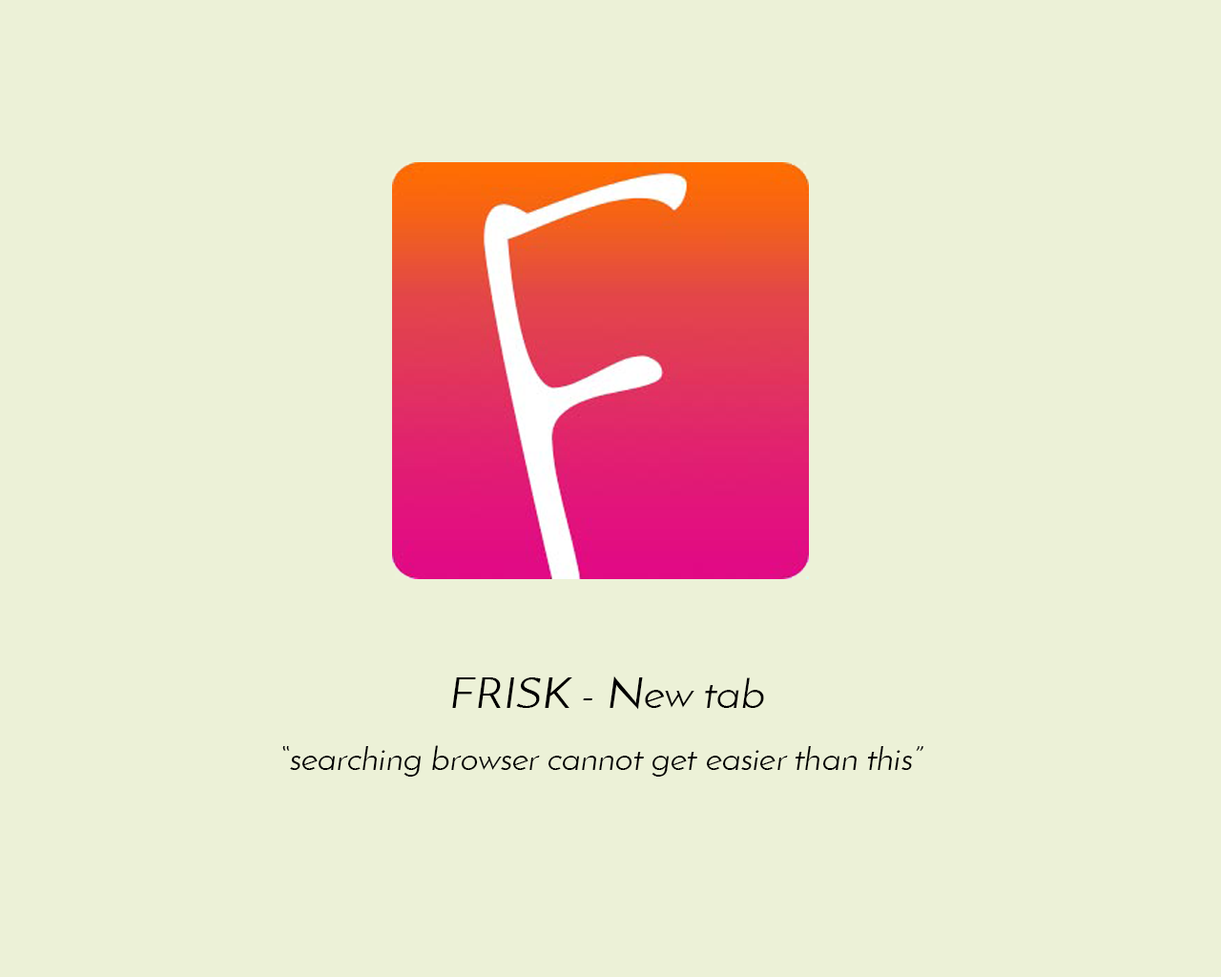
<style>
.page{position:relative;width:1221px;height:977px;background:#ecf1d7}
.page>*{position:absolute;margin:0}
.t1{font:42.9px "JosefinSans";color:#000000;scale:1.08 1}
.t2{font:33.4px "JosefinSans";color:#000000;scale:1.08 1}
</style>
<div class="page">
<p class="t1" style="left:452px;top:675px;width:312px;height:35px">FRISK - New tab</p>
<p class="t2" style="left:282px;top:745px;width:641px;height:31px">“searching browser cannot get easier than this”</p>
</div>
